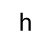
<style>
.page{position:relative;width:53px;height:41px;background:#ffffff}
.page>*{position:absolute;margin:0}
.t1{font:23.7px "DroidSans";color:#000000}
</style>
<div class="page">
<p class="t1" style="left:20px;top:12px;width:11px;height:19px">h</p>
</div>
